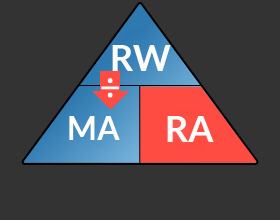
<style>
.page{position:relative;width:280px;height:220px;background:#333333}
.page>*{position:absolute;margin:0}
.t1{font:36px "Lato-Bold";color:#fcfdf8}
</style>
<div class="page">
<p class="t1" style="left:112px;top:45px;width:59px;height:26px">RW</p>
<p class="t1" style="left:167px;top:116px;width:47px;height:26px">RA</p>
</div>
